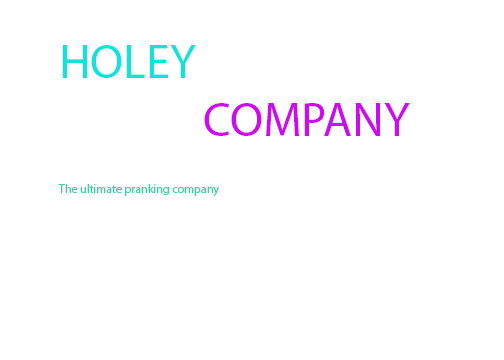
<style>
.page{position:relative;width:504px;height:360px;background:#ffffff}
.page>*{position:absolute;margin:0}
.t1{font:12px "MyriadPro-Regular";color:#34d3a1}
.t2{font:48px "MyriadPro-Regular";color:#13e1da}
.t3{font:48px "MyriadPro-Regular";color:#cc0cef}
</style>
<div class="page">
<p class="t1" style="left:58px;top:45px;width:352px;height:151px"><span class="t2">HOLEY<br>    </span><span class="t3">COMPANY<br></span>                            <br>                           <br>                                 <br>The ultimate pranking company</p>
</div>
